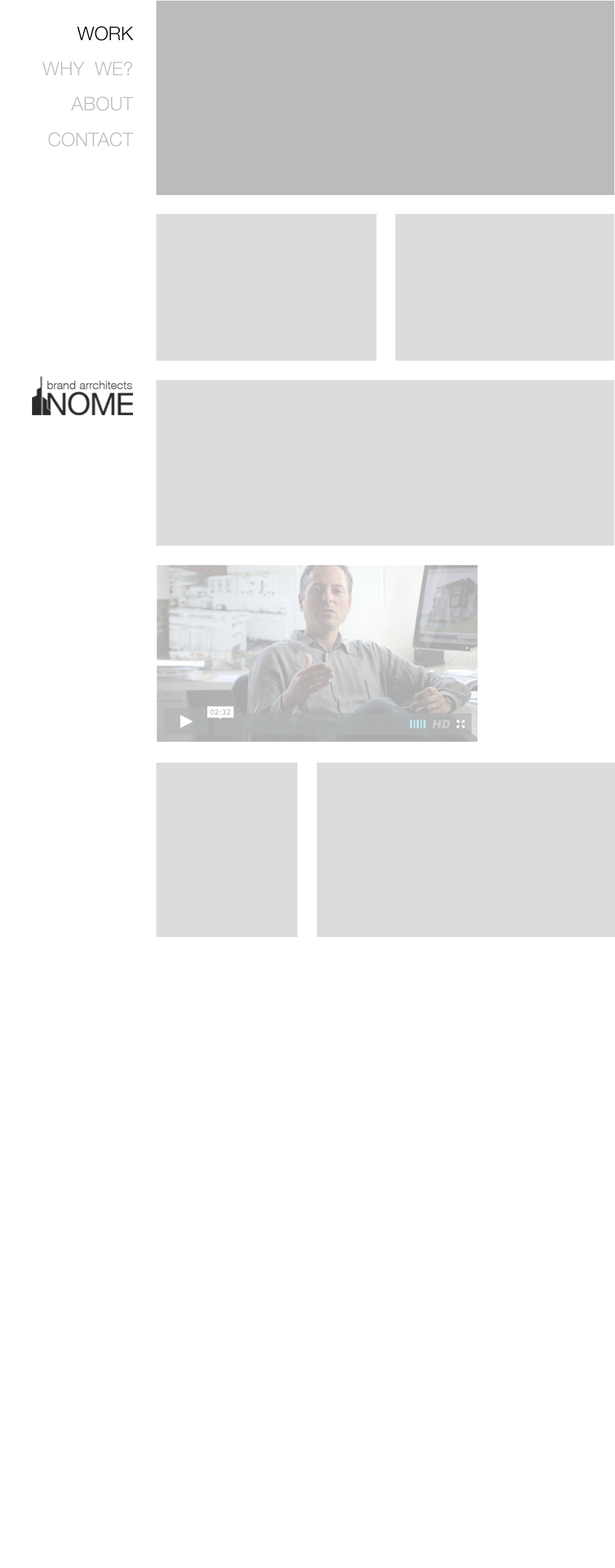
<style>
.page{position:relative;width:615px;height:1568px;background:#ffffff}
.page>*{position:absolute;margin:0}
.t1{font:18.8px "HelveticaNeue-Light";color:#000000;text-transform:uppercase}
.t2{font:18.8px "HelveticaNeue-Light";color:#bfbfbf;text-transform:uppercase}
.t3{font:11.6px "HelveticaNeue-Thin";color:#636363;font-weight:bold}
</style>
<div class="page">
<p class="t1" style="left:77px;top:26px;width:57px;height:15px">work</p>
<p class="t1" style="left:77px;top:26px;width:57px;height:15px">work</p>
<p class="t2" style="left:42px;top:61px;width:90px;height:14px">why  we?</p>
<p class="t2" style="left:71px;top:97px;width:63px;height:14px">about</p>
<p class="t2" style="left:48px;top:132px;width:86px;height:15px">contact</p>
<p class="t3" style="left:47px;top:381px;width:85px;height:8px">brand arrchitects</p>
</div>
